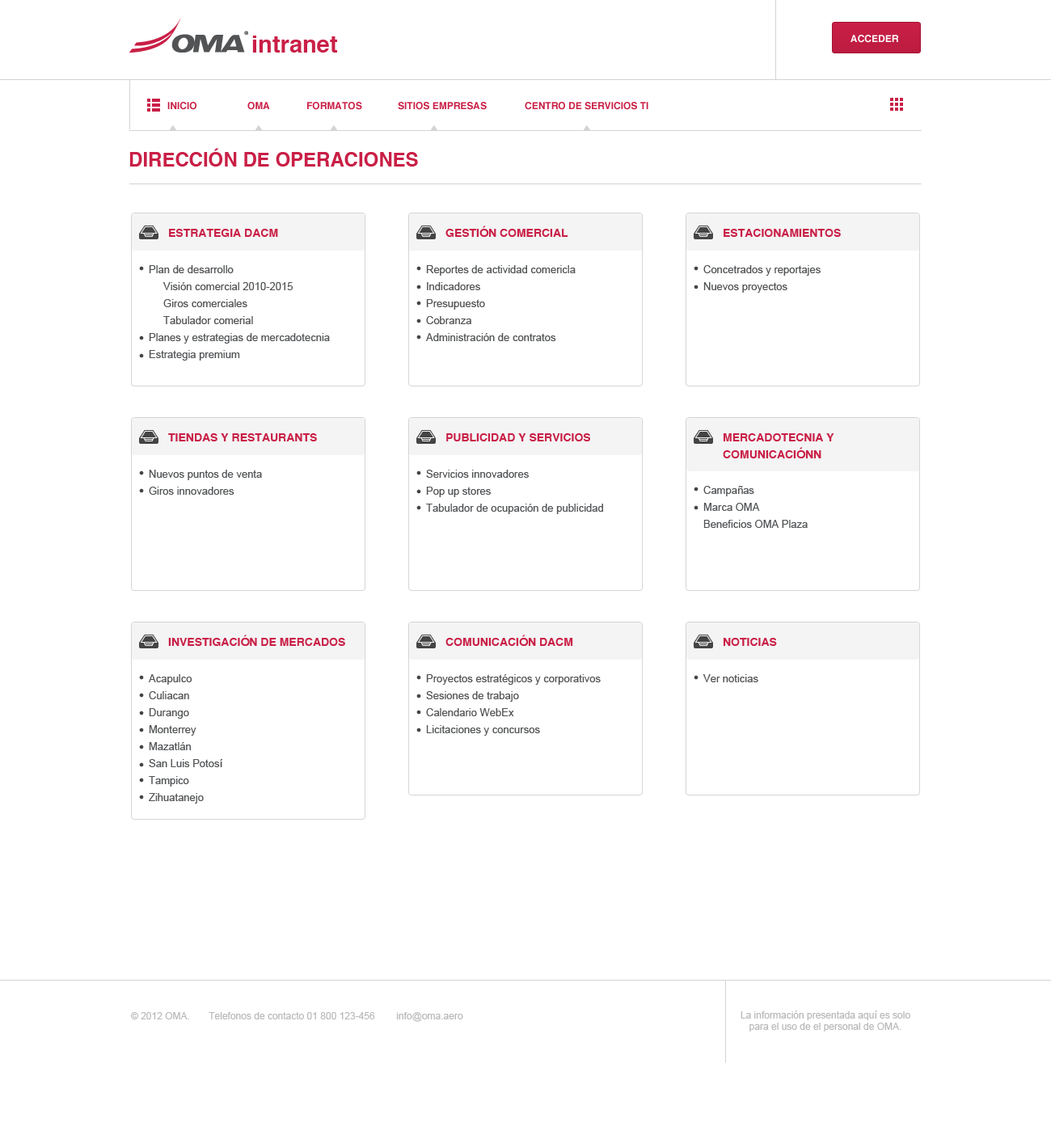
<style>
.page{position:relative;width:1051px;height:1135px;background:#ffffff}
.page>*{position:absolute;margin:0}
.t1{font:23.5px "Helvetica-Bold";color:#c91f46}
.t2{font:9.7px "Helvetica-Bold";color:#ffffff;text-transform:uppercase}
.t3{font:9.7px "Helvetica-Bold";color:#c91f46}
.t4{font:9.7px "Helvetica-Bold";color:#c91f46;text-transform:uppercase}
.t5{font:19.4px "Helvetica-Bold";color:#c91f46;text-transform:uppercase}
.t6{font:11.3px "Helvetica-Bold";color:#c91f46;text-transform:uppercase}
.t7{font:10.5px/17px "ArialMT";color:#515355}
.t8{font:11.3px/17px "Helvetica-Bold";color:#c91f46;text-transform:uppercase}
.t9{font:10.5px "ArialMT";color:#515355}
.t10{font:9.7px "ArialMT";color:#b9b9b9}
</style>
<div class="page">
<p class="t1" style="left:252px;top:36px;width:85px;height:17px">intranet</p>
<p class="t2" style="left:850px;top:35px;width:49px;height:8px">Acceder</p>
<p class="t3" style="left:167px;top:102px;width:29px;height:8px">INICIO</p>
<p class="t3" style="left:247px;top:102px;width:23px;height:8px">OMA</p>
<p class="t4" style="left:307px;top:102px;width:55px;height:8px">formatos</p>
<p class="t4" style="left:398px;top:102px;width:89px;height:8px">sitios empresas</p>
<p class="t4" style="left:525px;top:102px;width:123px;height:8px">centro de servicios ti</p>
<p class="t5" style="left:129px;top:148px;width:289px;height:19px">Dirección de operaciones</p>
<p class="t6" style="left:169px;top:229px;width:109px;height:8px">Estrategia dacm</p>
<p class="t6" style="left:445px;top:226px;width:123px;height:11px">Gestión comercial</p>
<p class="t6" style="left:723px;top:229px;width:118px;height:8px">estacionamientos</p>
<p class="t7" style="left:149px;top:265px;width:181px;height:95px">Plan de desarrollo<br>     Visión comercial 2010-2015<br>     Giros comerciales<br>     Tabulador comerial<br>Planes y estrategias de mercadotecnia<br>Estrategia premium</p>
<p class="t7" style="left:426px;top:265px;width:149px;height:76px">Reportes de actividad comericla<br>Indicadores<br>Presupuesto<br>Cobranza<br>Administración de contratos</p>
<p class="t7" style="left:703px;top:265px;width:117px;height:28px">Concetrados y reportajes<br>Nuevos proyectos</p>
<p class="t6" style="left:168px;top:433px;width:149px;height:8px">tiendas y restaurants</p>
<p class="t6" style="left:446px;top:433px;width:144px;height:8px">Publicidad y servicios</p>
<p class="t8" style="left:723px;top:433px;width:111px;height:25px">mercadotecnia y <br>comunicaciónn</p>
<p class="t7" style="left:149px;top:470px;width:113px;height:25px">Nuevos puntos de venta<br>Giros innovadores</p>
<p class="t7" style="left:426px;top:470px;width:177px;height:44px">Servicios innovadores<br>Pop up stores<br>Tabulador de ocupación de publicidad</p>
<p class="t7" style="left:703px;top:486px;width:104px;height:42px">Campañas<br>Marca OMA<br>Beneficios OMA Plaza</p>
<p class="t6" style="left:168px;top:634px;width:177px;height:12px">Investigación de mercados</p>
<p class="t6" style="left:445px;top:634px;width:128px;height:12px">comunicación dacm</p>
<p class="t6" style="left:723px;top:638px;width:54px;height:8px">noticias</p>
<p class="t7" style="left:149px;top:674px;width:74px;height:129px">Acapulco<br>Culiacan<br>Durango<br>Monterrey<br>Mazatlán<br>San Luis Potosí<br>Tampico<br>Zihuatanejo</p>
<p class="t7" style="left:426px;top:674px;width:175px;height:62px">Proyectos estratégicos y corporativos<br>Sesiones de trabajo<br>Calendario WebEx<br>Licitaciones y concursos</p>
<p class="t9" style="left:702px;top:674px;width:56px;height:8px">Ver noticias</p>
<p class="t10" style="left:130px;top:1012px;width:333px;height:10px">© 2012 OMA.       Telefonos de contacto 01 800 123-456        info@oma.aero</p>
<p class="t10" style="left:740px;top:1010px;width:170px;height:21px;text-align:center">La información presentada aquí es solo<br>para el uso de el personal de OMA.</p>
</div>
